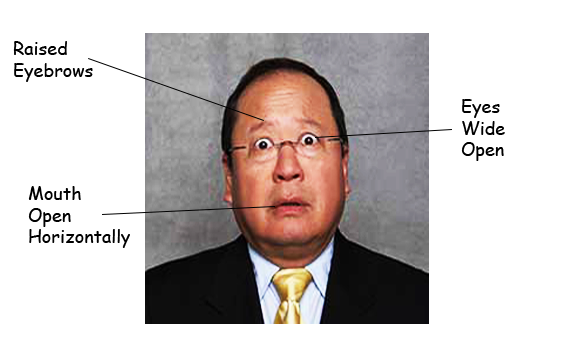
<style>
.page{position:relative;width:576px;height:360px;background:#ffffff}
.page>*{position:absolute;margin:0}
.t1{font:18px "ComicSansMS";color:#000000}
</style>
<div class="page">
<p class="t1" style="left:13px;top:41px;width:80px;height:41px">Raised<br>Eyebrows</p>
<p class="t1" style="left:461px;top:99px;width:44px;height:62px">Eyes<br>Wide<br>Open</p>
<p class="t1" style="left:28px;top:186px;width:102px;height:62px">Mouth<br>Open<br>Horizontally</p>
</div>
